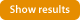
<style>
.page{position:relative;width:80px;height:20px;background:#e68d00}
.page>*{position:absolute;margin:0}
.t1{font:11px "MyriadPro-Semibold";color:#ffffff}
</style>
<div class="page">
<p class="t1" style="left:10px;top:5px;width:60px;height:8px">Show results</p>
</div>
